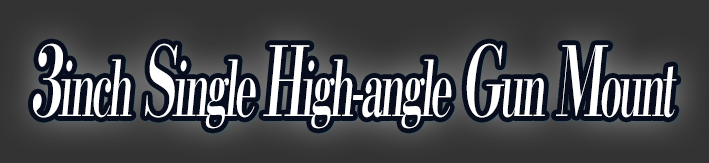
<style>
.page{position:relative;width:709px;height:163px}
.page>*{position:absolute;margin:0}
.t1{font:76.8px "KochoStd-Heavy";letter-spacing:-0.08em;color:#ffffff;font-style:italic;scale:0.53 1}
.t2{font:96px "KochoStd-Heavy";letter-spacing:-0.08em;color:#ffffff;font-style:italic;scale:0.53 1}
</style>
<div class="page">
<p class="t1" style="left:33px;top:43px;width:644px;height:86px"><span class="t2">3</span>inch<span class="t2"> S</span>ingle <span class="t2">H</span>igh-angle<span class="t2"> G</span>un<span class="t2"> M</span>ount</p>
</div>
